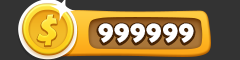
<style>
.page{position:relative;width:240px;height:60px;background:#333333}
.page>*{position:absolute;margin:0}
.t1{font:25px "Skranji-Bold";letter-spacing:0.025em;color:#ffffff}
</style>
<div class="page">
<p class="t1" style="left:98px;top:23px;width:96px;height:20px">999999</p>
</div>
